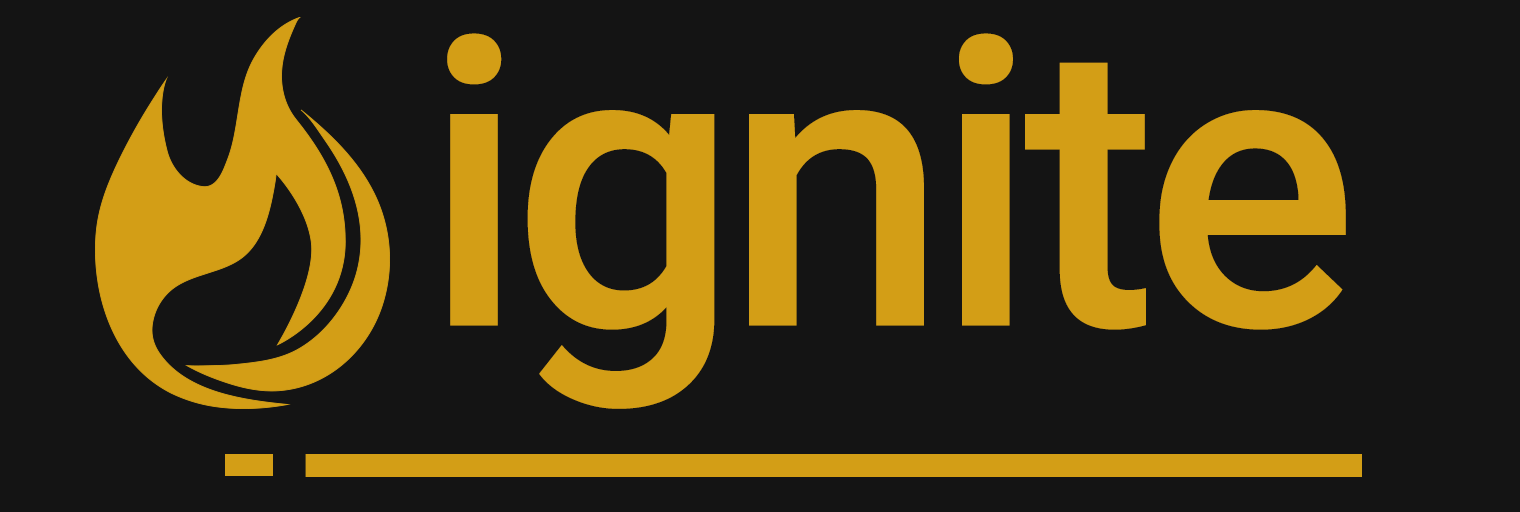
<style>
.page{position:relative;width:1520px;height:512px;background:#141414}
.page>*{position:absolute;margin:0}
.t1{font:400px "Roboto-Medium";letter-spacing:-0.033em;color:#d39e16}
</style>
<div class="page">
<p class="t1" style="left:447px;top:33px;width:899px;height:376px">ignite</p>
</div>
